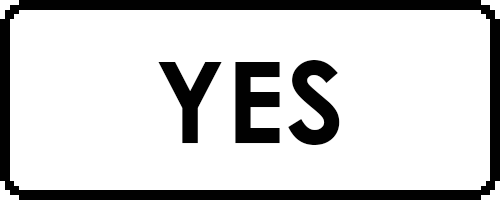
<style>
.page{position:relative;width:500px;height:200px;background:#ffffff}
.page>*{position:absolute;margin:0}
.t1{font:113px "CenturyGothic-Bold";letter-spacing:0.01em;color:#010101}
</style>
<div class="page">
<p class="t1" style="left:158px;top:60px;width:182px;height:85px">YES</p>
</div>
